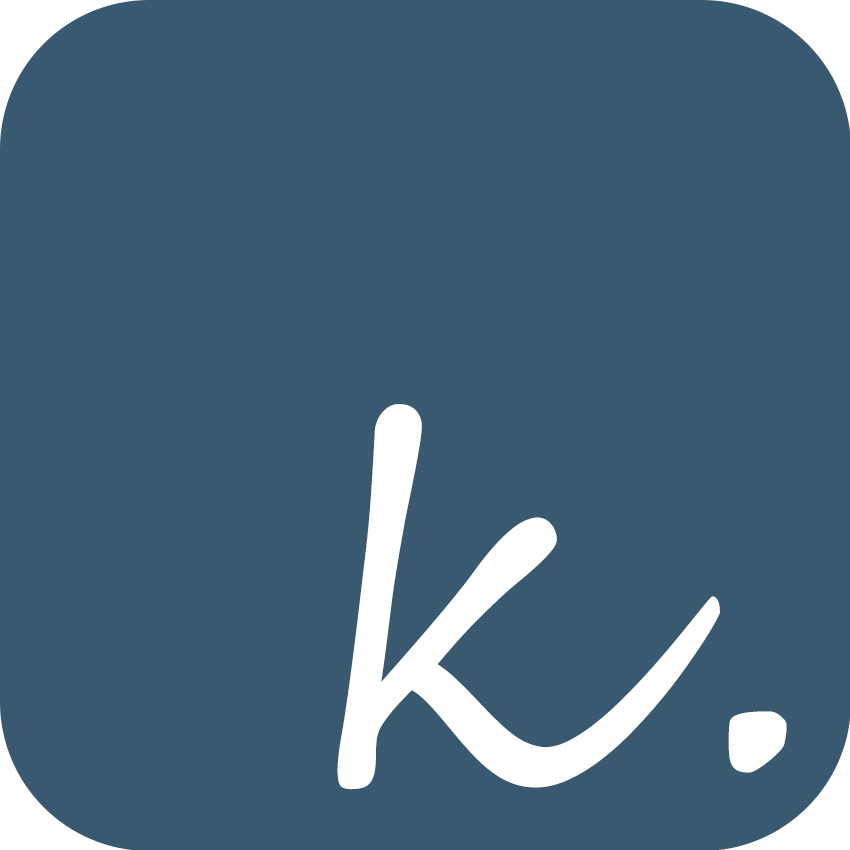
<style>
.page{position:relative;width:850px;height:850px;background:#395971}
.page>*{position:absolute;margin:0}
.t1{font:500px "SegoeScript";color:#ffffff}
</style>
<div class="page">
<p class="t1" style="left:337px;top:404px;width:450px;height:386px">k.</p>
</div>
